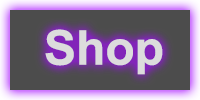
<style>
.page{position:relative;width:200px;height:100px;background:#4c4c4c}
.page>*{position:absolute;margin:0}
.t1{font:48px "Arial-BoldMT";color:#dcdcdc}
.t2{font:36px "Arial-BoldMT";color:#dcdcdc}
</style>
<div class="page">
<p class="t1" style="left:45px;top:29px;width:118px;height:46px"><span class="t2"><br><br></span>Shop</p>
</div>
